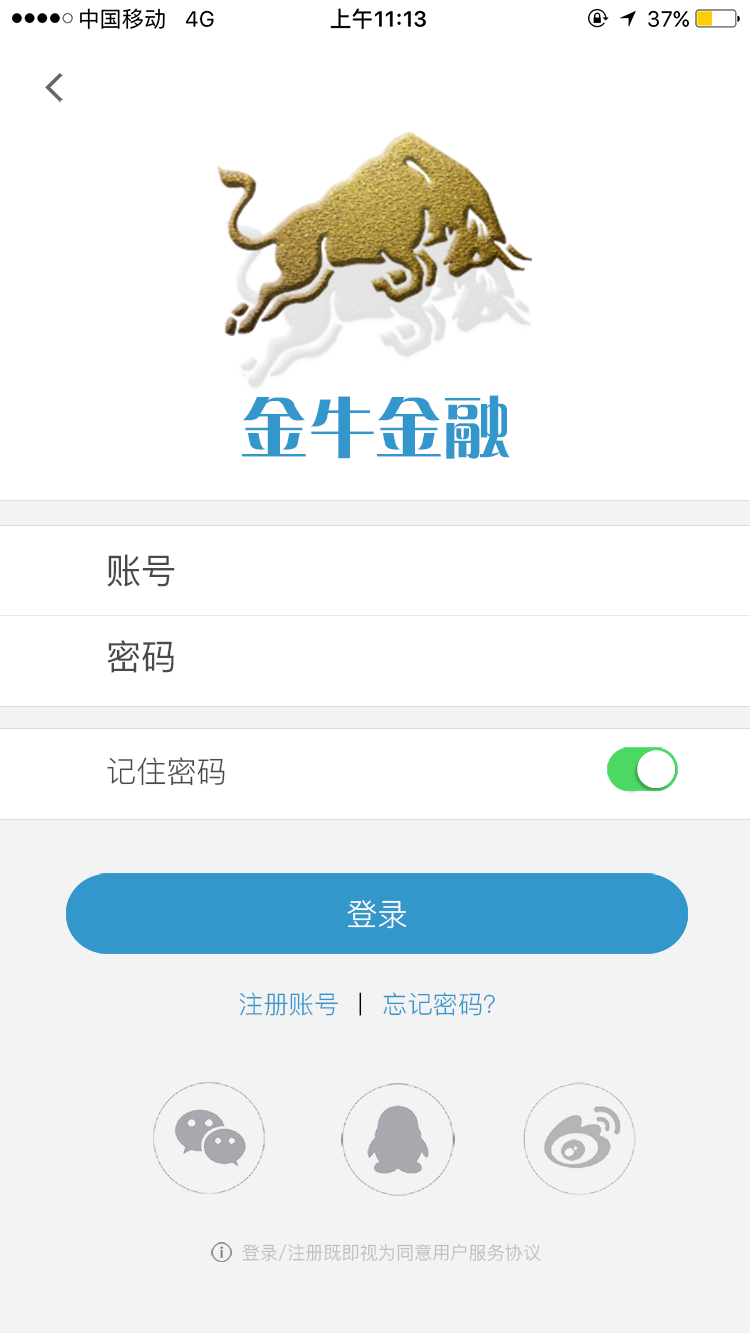
<style>
.page{position:relative;width:750px;height:1333px;background:#ffffff}
.page>*{position:absolute;margin:0}
.t1{font:67.6px "GJJCQJW--GB1-0";color:#3397cc}
.t2{font:35px "PingFang-SC-Medium";color:#4a4a4a}
.t3{font:30px "PingFang-SC-Regular";color:#4a4a4a}
.t4{font:30.9px "PingFang-SC-Regular";color:#ffffff}
.t5{font:25px "PingFang-SC-Regular";color:#3397cc}
.t6{font:25px "PingFang-SC-Regular";color:#000000}
.t7{font:18.1px "PingFang-SC-Regular";color:#bdbcbc}
</style>
<div class="page">
<p class="t1" style="left:242px;top:395px;width:268px;height:64px">金牛金融</p>
<p class="t2" style="left:107px;top:554px;width:68px;height:33px">账号</p>
<p class="t2" style="left:107px;top:640px;width:67px;height:33px">密码</p>
<p class="t3" style="left:107px;top:757px;width:118px;height:29px">记住密码</p>
<p class="t4" style="left:347px;top:900px;width:60px;height:29px">登录</p>
<p class="t5" style="left:239px;top:992px;width:123px;height:24px">注册账号 <span class="t6">丨</span></p>
<p class="t5" style="left:383px;top:992px;width:112px;height:24px">忘记密码？</p>
<p class="t7" style="left:242px;top:1243px;width:299px;height:18px">登录/注册既即视为同意用户服务协议</p>
</div>
